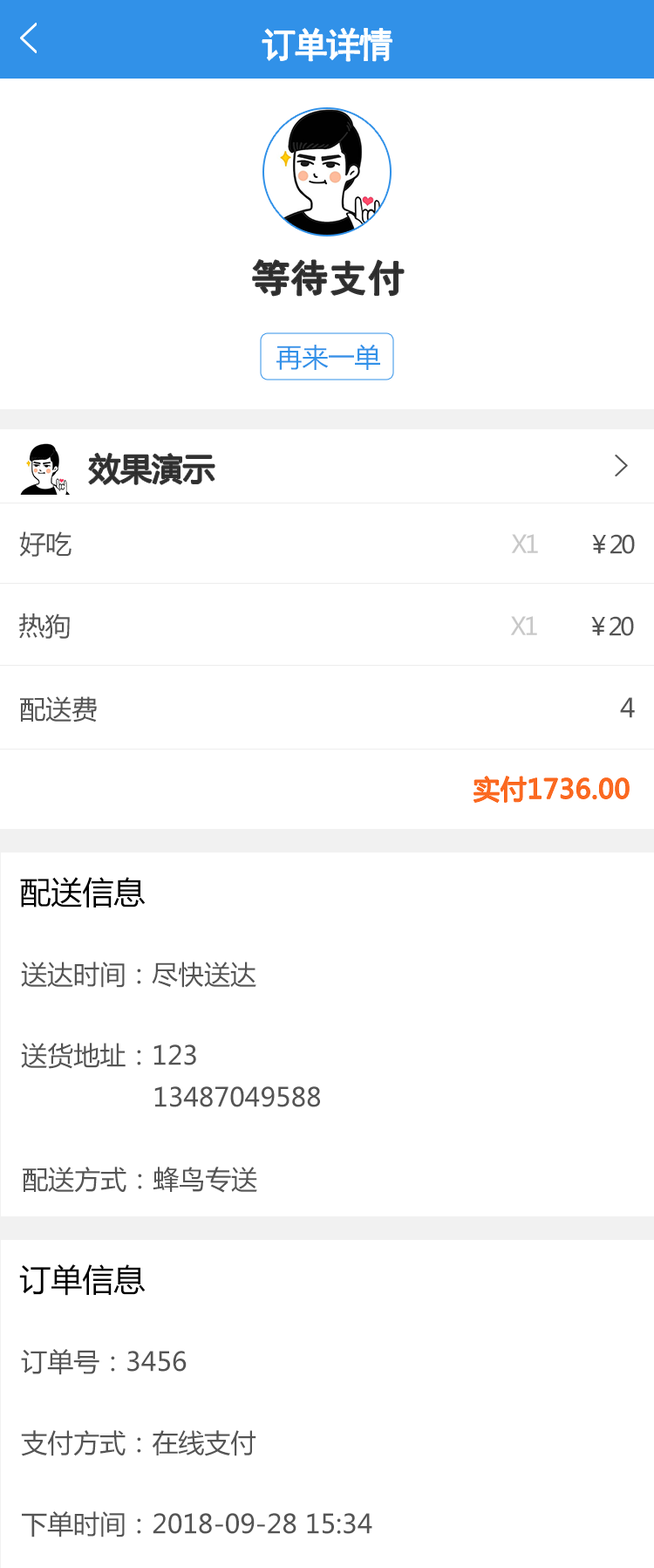
<style>
.page{position:relative;width:654px;height:1568px;background:#ffffff}
.page>*{position:absolute;margin:0}
.t1{font:34.9px "SimHei";letter-spacing:-0.1em;color:#ffffff;font-weight:bold}
.t2{font:37.5px "SimHei";color:#2b2b2b;font-weight:bold}
.t3{font:26.2px "MicrosoftYaHei";color:#3191e8}
.t4{font:31.4px "MicrosoftYaHei";color:#2b2b2b}
.t5{font:26.2px "MicrosoftYaHei";color:#545454}
.t6{font:24.4px "MicrosoftYaHei";letter-spacing:-0.1em;color:#c8c8c8}
.t7{font:24.4px "MicrosoftYaHei";letter-spacing:-0.1em;color:#545454}
.t8{font:26.2px "MicrosoftYaHei";color:#fb6a22;font-weight:bold}
.t9{font:31.4px "MicrosoftYaHei";color:#000000}
.t10{font:26.2px/81.1px "MicrosoftYaHei";color:#545454}
</style>
<div class="page">
<p class="t1" style="left:263px;top:28px;width:130px;height:33px">订单详情</p>
<p class="t2" style="left:253px;top:260px;width:151px;height:36px">等待支付</p>
<p class="t3" style="left:277px;top:344px;width:103px;height:26px">再来一单</p>
<p class="t4" style="left:89px;top:453px;width:126px;height:31px">效果演示</p>
<p class="t5" style="left:19px;top:531px;width:53px;height:26px">好吃</p>
<p class="t6" style="left:511px;top:534px;width:27px;height:19px">X1</p>
<p class="t7" style="left:592px;top:534px;width:43px;height:20px">￥20</p>
<p class="t5" style="left:19px;top:613px;width:51px;height:26px">热狗</p>
<p class="t6" style="left:510px;top:616px;width:28px;height:19px">X1</p>
<p class="t7" style="left:592px;top:616px;width:42px;height:20px">￥20</p>
<p class="t5" style="left:20px;top:696px;width:77px;height:26px">配送费</p>
<p class="t5" style="left:620px;top:697px;width:15px;height:21px">4</p>
<p class="t8" style="left:474px;top:776px;width:156px;height:27px">实付1736.00</p>
<p class="t9" style="left:20px;top:877px;width:126px;height:30px">配送信息</p>
<p class="t10" style="left:21px;top:962px;width:236px;height:107px">送达时间：尽快送达<br>送货地址：123</p>
<p class="t5" style="left:154px;top:1086px;width:166px;height:21px">13487049588</p>
<p class="t5" style="left:23px;top:1167px;width:234px;height:26px">配送方式：蜂鸟专送</p>
<p class="t9" style="left:19px;top:1264px;width:127px;height:32px">订单信息</p>
<p class="t10" style="left:21px;top:1349px;width:352px;height:188px">订单号：3456<br>支付方式：在线支付<br>下单时间：2018-09-28 15:34</p>
</div>
